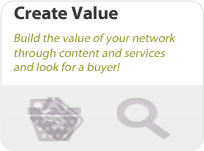
<style>
.page{position:relative;width:204px;height:151px;background:#ffffff}
.page>*{position:absolute;margin:0}
.t1{font:17.9px "MyriadWebPro-Bold";color:#333333}
.t2{font:12px "MyriadWebPro";color:#999933;font-style:italic}
</style>
<div class="page">
<p class="t1" style="left:14px;top:6px;width:104px;height:14px">Create Value</p>
<p class="t2" style="left:14px;top:33px;width:162px;height:41px">Build the value of your network <br>through content and services<br>and look for a buyer!</p>
</div>
